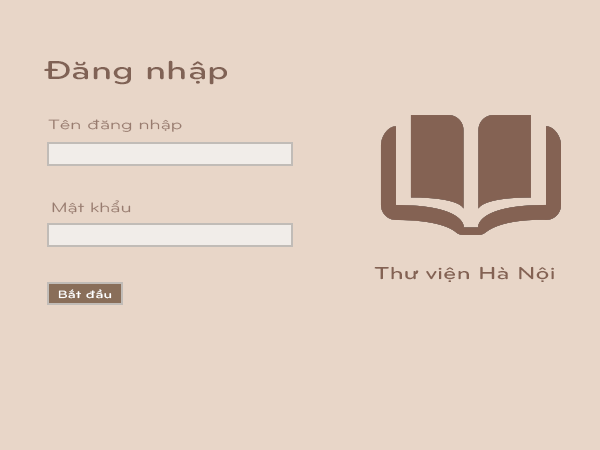
<style>
.page{position:relative;width:600px;height:450px;background:#e8d6c8}
.page>*{position:absolute;margin:0}
.t1{font:27px "UTMBryantLGBold";color:#806255;scale:1.4 1}
.t2{font:14px "UTM-BryantLG";color:#987b6e;scale:1.4 1}
.t3{font:18px "UTMBryantLGBold";color:#846253;scale:1.4 1}
.t4{font:11px "UTMBryantLGBold";color:#ffffff;scale:1.4 1}
</style>
<div class="page">
<p class="t1" style="left:44px;top:60px;width:183px;height:25px">Đăng nhập</p>
<p class="t2" style="left:48px;top:119px;width:134px;height:13px">Tên đăng nhập</p>
<p class="t2" style="left:52px;top:200px;width:79px;height:14px">Mật khẩu</p>
<p class="t3" style="left:374px;top:266px;width:180px;height:16px">Thư viện Hà Nội</p>
<p class="t4" style="left:58px;top:289px;width:54px;height:10px">Bắt đầu</p>
</div>
